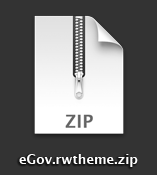
<style>
.page{position:relative;width:157px;height:175px;background:#333333}
.page>*{position:absolute;margin:0}
.t1{font:13px "LucidaGrande-Bold";color:#ffffff}
</style>
<div class="page">
<p class="t1" style="left:19px;top:154px;width:119px;height:13px">eGov.rwtheme.zip</p>
</div>
